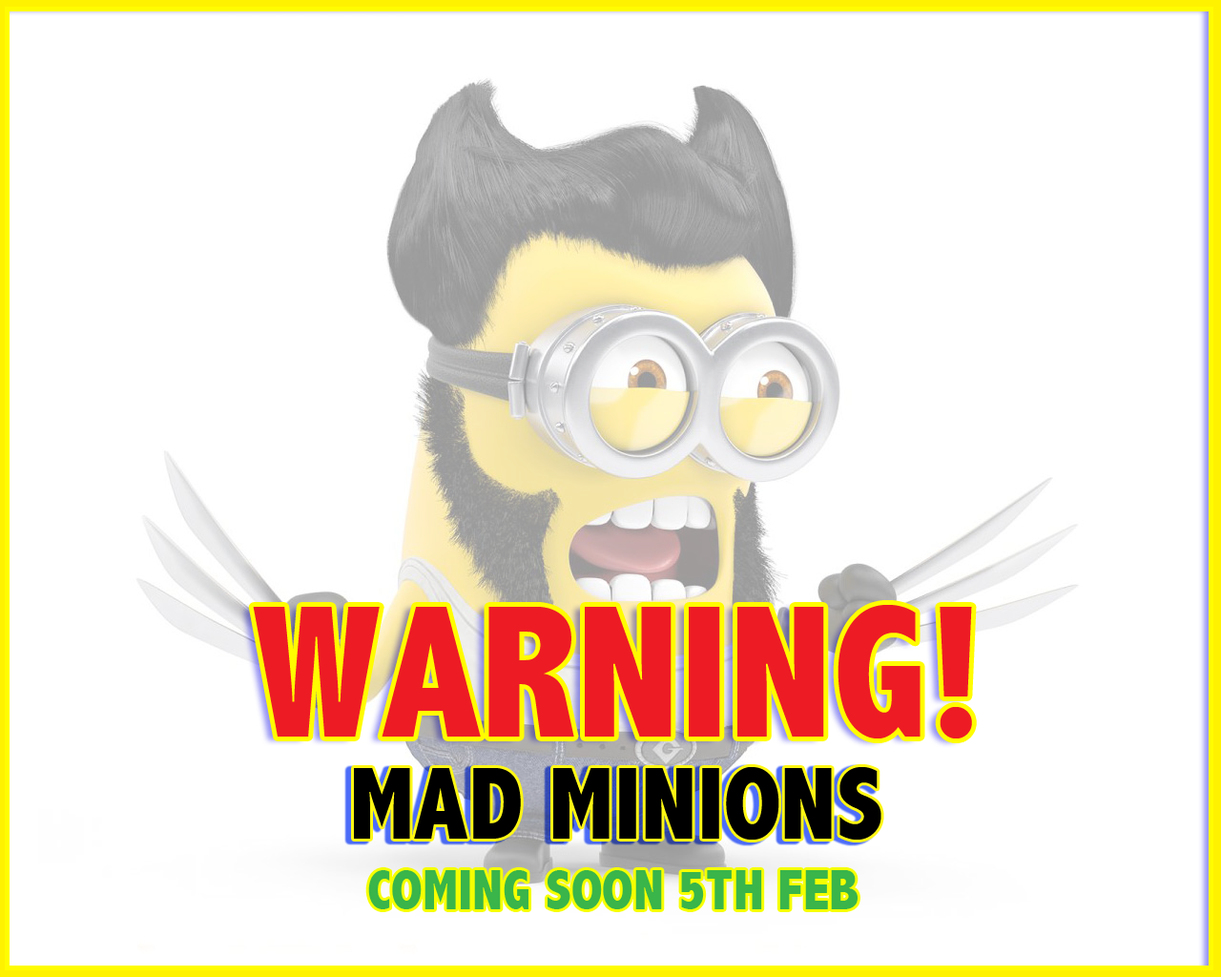
<style>
.page{position:relative;width:1221px;height:977px;background:#ffffff}
.page>*{position:absolute;margin:0}
.t1{font:103px "AbadiMT-CondensedExtraBold";color:#000000}
.t2{font:57.2px "AbadiMT-CondensedExtraBold";color:#39b54a}
</style>
<div class="page">
<p class="t1" style="left:354px;top:767px;width:527px;height:72px">MAD MINIONS</p>
<p class="t2" style="left:368px;top:870px;width:489px;height:39px">COMING SOON 5TH FEB</p>
</div>
